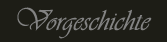
<style>
.page{position:relative;width:167px;height:42px;background:#1d1d16}
.page>*{position:absolute;margin:0}
.t1{font:30px "VivanteDTCITALIC";color:#838383}
</style>
<div class="page">
<p class="t1" style="left:17px;top:7px;width:135px;height:32px">Vorgeschichte</p>
</div>
